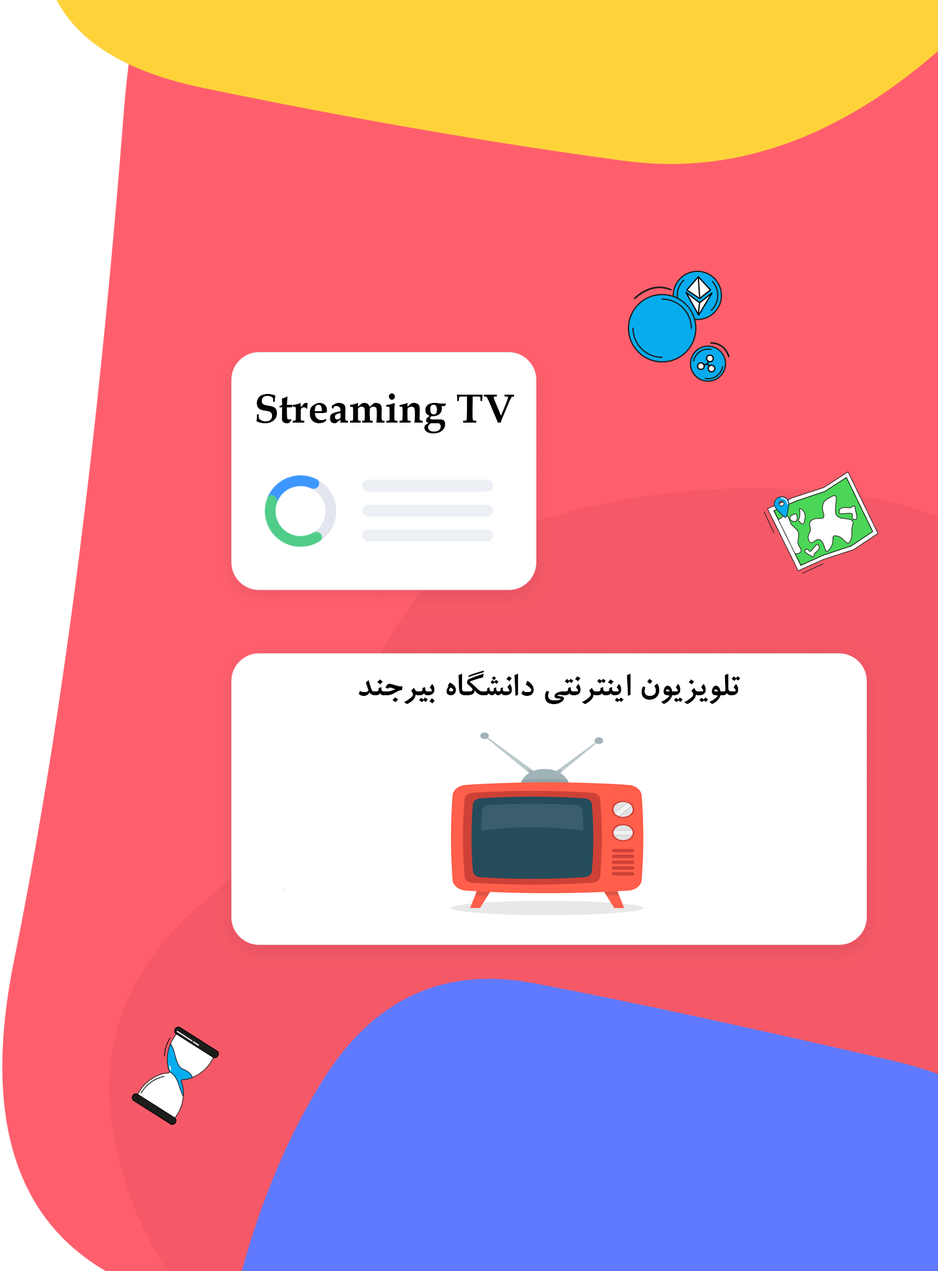
<style>
.page{position:relative;width:938px;height:1271px;background:#ff5f6d}
.page>*{position:absolute;margin:0}
.t1{font:40.7px "BookAntiqua-Bold";color:#000000}
.t2{font:35.6px "BRoyaBold";color:#000000}
</style>
<div class="page">
<p class="t1" style="left:256px;top:393px;width:258px;height:40px">Streaming TV</p>
<p class="t2" style="left:358px;top:671px;width:382px;height:33px">تلویزیون اینترنتی دانشگاه بیرجند</p>
</div>
